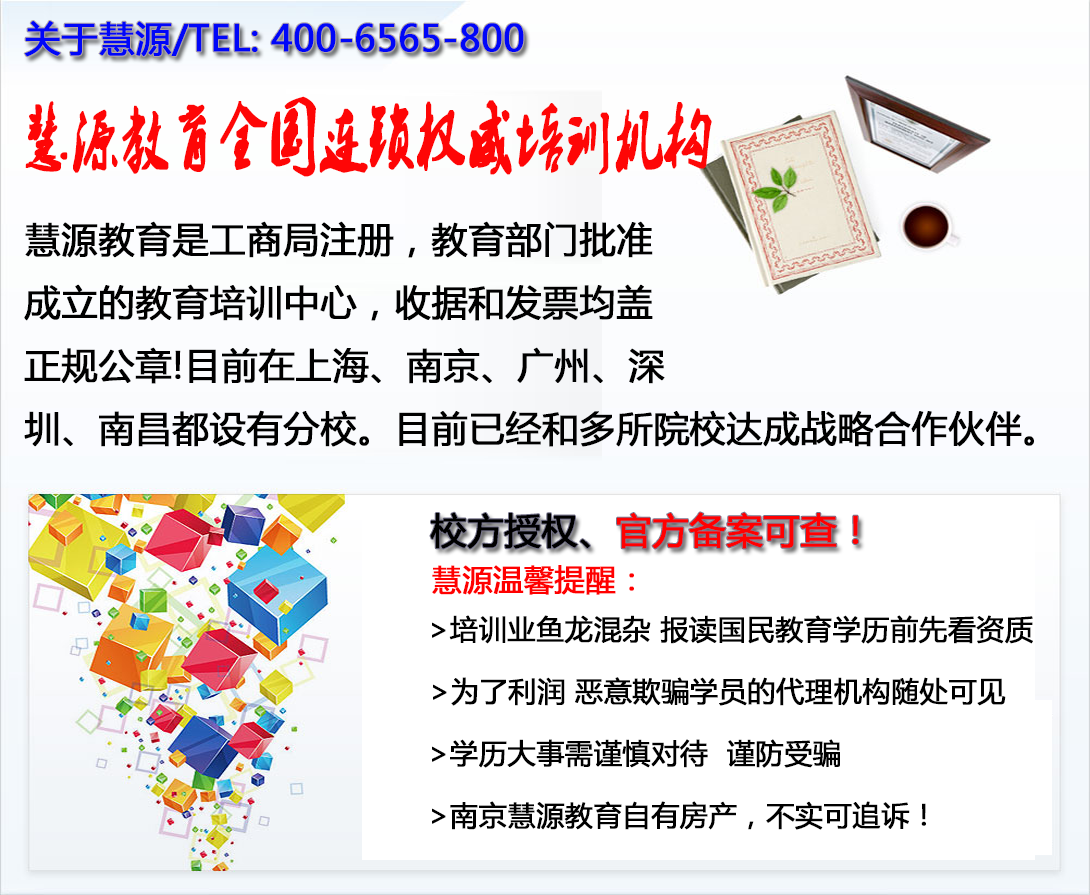
<style>
.page{position:relative;width:1090px;height:895px;background:#ffffff}
.page>*{position:absolute;margin:0}
.t1{font:36px "MicrosoftYaHei";color:#0006f8;font-weight:bold}
.t2{font:72px "2.0-";color:#fe0606;font-weight:bold;scale:0.67 1}
.t3{font:36px "MicrosoftYaHei";color:#000000;font-weight:bold}
.t4{font:36px "MicrosoftYaHei";color:#ff0000;font-weight:bold}
.t5{font:30px "MicrosoftYaHei";color:#ff0000;font-weight:bold}
.t6{font:28px "MicrosoftYaHei";color:#000000;font-weight:bold}
</style>
<div class="page">
<p class="t1" style="left:24px;top:21px;width:500px;height:36px">关于慧源/TEL: 400-6565-800</p>
<p class="t2" style="left:25px;top:96px;width:687px;height:81px">慧源教育全国连锁权威培训机构</p>
<p class="t3" style="left:24px;top:221px;width:1010px;height:226px">慧源教育是工商局注册，教育部门批准<br>成立的教育培训中心，收据和发票均盖<br>正规公章!目前在上海、南京、广州、深<br>圳、南昌都设有分校。目前已经和多所院校达成战略合作伙伴。</p>
<p class="t4" style="left:430px;top:512px;width:429px;height:37px"><span class="t3">校方授权、</span>官方备案可查！</p>
<p class="t5" style="left:432px;top:565px;width:202px;height:30px">慧源温馨提醒：</p>
<p class="t6" style="left:432px;top:615px;width:601px;height:29px">&gt;培训业鱼龙混杂 报读国民教育学历前先看资质</p>
<p class="t6" style="left:433px;top:677px;width:573px;height:29px">&gt;为了利润 恶意欺骗学员的代理机构随处可见</p>
<p class="t6" style="left:432px;top:739px;width:408px;height:29px">&gt;学历大事需谨慎对待  谨防受骗</p>
<p class="t6" style="left:432px;top:801px;width:494px;height:29px">&gt;南京慧源教育自有房产，不实可追诉！</p>
</div>
